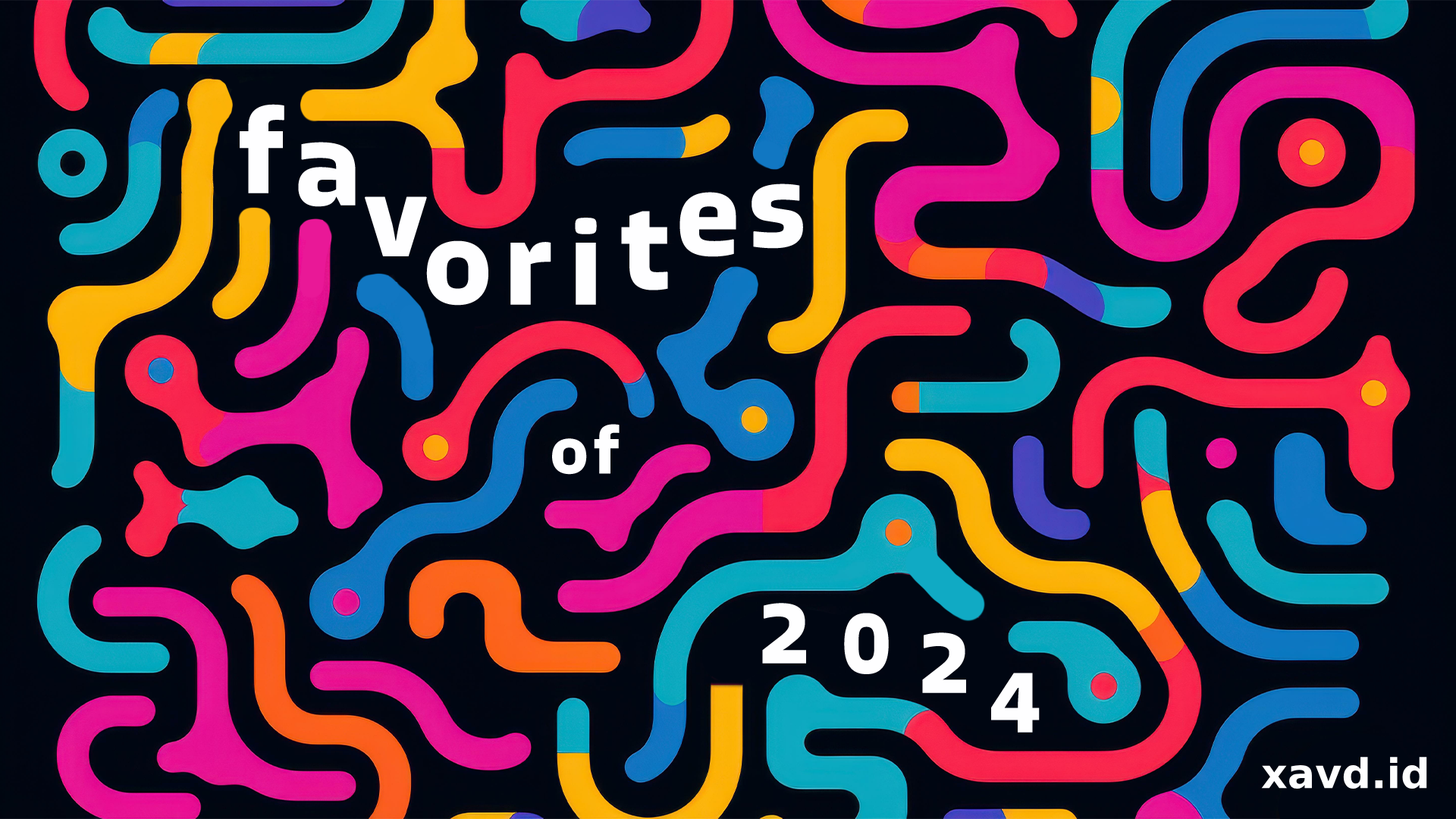
<style>
.page{position:relative;width:1456px;height:819px}
.page>*{position:absolute;margin:0}
.t1{font:116.9px "Allotrope-Bold";color:#fefeff}
.t2{font:112.5px "Allotrope-Bold";color:#fefeff}
.t3{font:65.3px "Allotrope-Bold";letter-spacing:0.08em;color:#fefeff}
.t4{font:88.5px "Allotrope-Bold";color:#fefeff}
.t5{font:40.9px "Allotrope-Bold";color:#fefeff}
</style>
<div class="page">
<p class="t1" style="left:240px;top:104px;width:44px;height:89px">f</p>
<p class="t1" style="left:298px;top:142px;width:58px;height:65px">a</p>
<p class="t1" style="left:751px;top:184px;width:52px;height:65px">s</p>
<p class="t2" style="left:365px;top:196px;width:62px;height:60px">v</p>
<p class="t1" style="left:679px;top:192px;width:57px;height:65px">e</p>
<p class="t1" style="left:575px;top:218px;width:22px;height:87px">i</p>
<p class="t1" style="left:621px;top:211px;width:47px;height:79px">t</p>
<p class="t1" style="left:426px;top:240px;width:62px;height:66px">o</p>
<p class="t1" style="left:510px;top:242px;width:41px;height:63px">r</p>
<p class="t3" style="left:552px;top:424px;width:68px;height:51px">of</p>
<p class="t4" style="left:762px;top:603px;width:44px;height:61px">2</p>
<p class="t4" style="left:844px;top:613px;width:45px;height:61px">0</p>
<p class="t4" style="left:922px;top:632px;width:44px;height:61px">2</p>
<p class="t4" style="left:991px;top:673px;width:49px;height:60px">4</p>
<p class="t5" style="left:1261px;top:757px;width:166px;height:32px">xavd.id</p>
</div>
